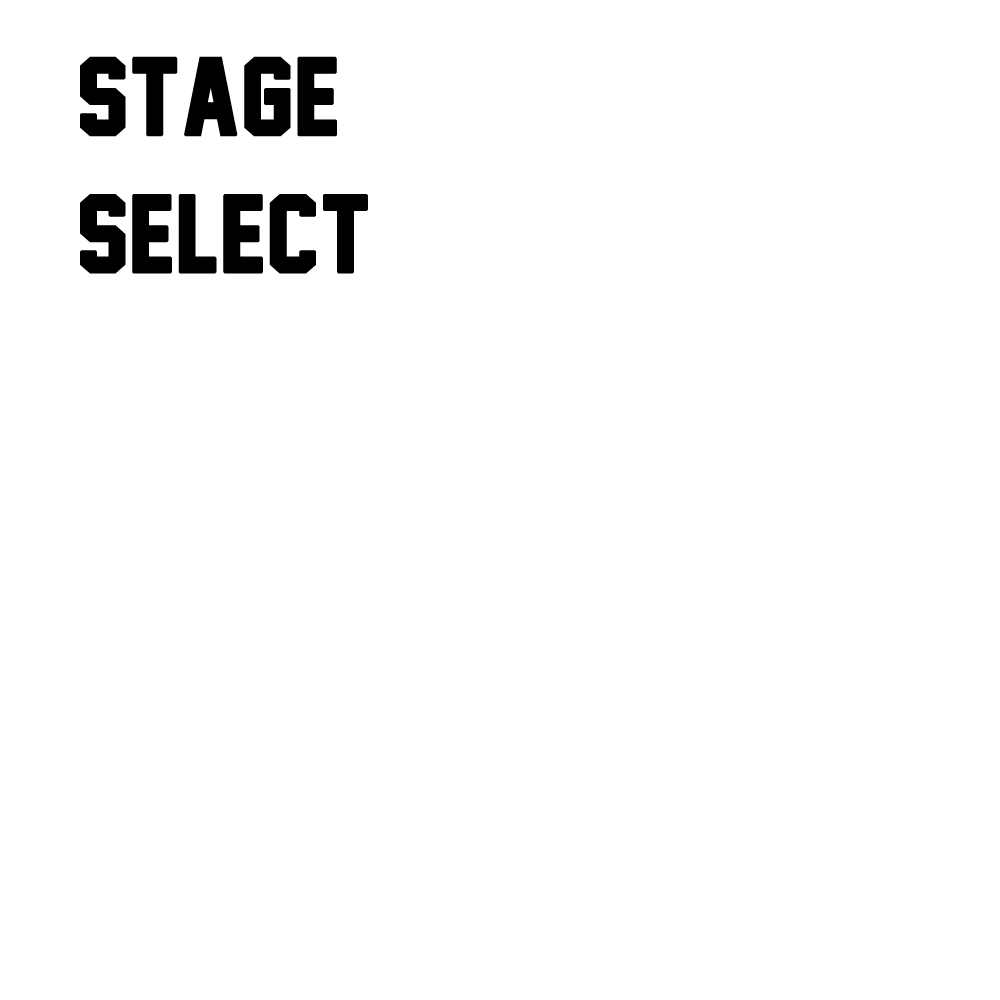
<style>
.page{position:relative;width:1000px;height:1000px;background:#ffffff}
.page>*{position:absolute;margin:0}
.t1{font:100px "JerseyM54";color:#000000;font-weight:bold}
</style>
<div class="page">
<p class="t1" style="left:80px;top:56px;width:288px;height:218px">Stage<br>Select</p>
</div>
